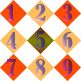
<style>
.page{position:relative;width:81px;height:81px;background:#ffffff}
.page>*{position:absolute;margin:0}
.t1{font:22.2px "BernardMT-Condensed"}
</style>
<div class="page">
<p class="t1" style="left:7px;top:4px;width:7px;height:17px">1</p>
<p class="t1" style="left:35px;top:4px;width:11px;height:17px">2</p>
<p class="t1" style="left:62px;top:4px;width:11px;height:17px">3</p>
<p class="t1" style="left:35px;top:30px;width:11px;height:19px">5</p>
<p class="t1" style="left:6px;top:32px;width:11px;height:17px">4</p>
<p class="t1" style="left:62px;top:32px;width:11px;height:17px">6</p>
<p class="t1" style="left:6px;top:59px;width:11px;height:17px">7</p>
<p class="t1" style="left:35px;top:59px;width:11px;height:17px">8</p>
<p class="t1" style="left:62px;top:59px;width:11px;height:17px">9</p>
</div>
